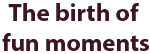
<style>
.page{position:relative;width:150px;height:54px;background:#ffffff}
.page>*{position:absolute;margin:0}
.t1{font:25px "MyriadPro-Bold";color:#3e161e}
</style>
<div class="page">
<p class="t1" style="left:2px;top:3px;width:147px;height:48px;text-align:center">The birth of <br>fun moments</p>
</div>
